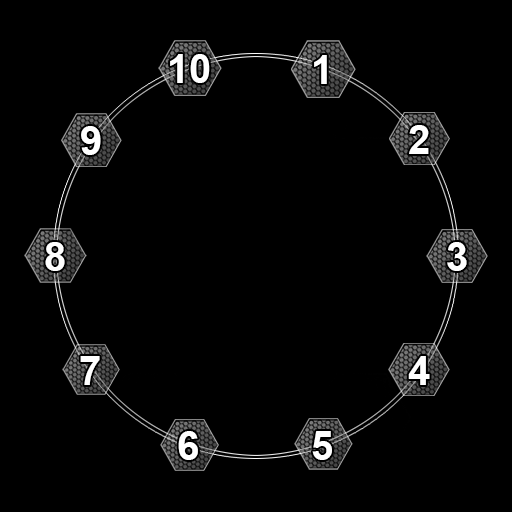
<style>
.page{position:relative;width:512px;height:512px;background:#000000}
.page>*{position:absolute;margin:0}
.t1{font:40px "Arial-BoldMT";color:#ffffff}
</style>
<div class="page">
<p class="t1" style="left:170px;top:54px;width:40px;height:29px">10</p>
<p class="t1" style="left:314px;top:55px;width:13px;height:29px">1</p>
<p class="t1" style="left:81px;top:126px;width:20px;height:29px">9</p>
<p class="t1" style="left:409px;top:125px;width:20px;height:29px">2</p>
<p class="t1" style="left:45px;top:242px;width:20px;height:29px">8</p>
<p class="t1" style="left:447px;top:242px;width:20px;height:29px">3</p>
<p class="t1" style="left:80px;top:356px;width:20px;height:29px">7</p>
<p class="t1" style="left:408px;top:356px;width:22px;height:29px">4</p>
<p class="t1" style="left:178px;top:431px;width:20px;height:29px">6</p>
<p class="t1" style="left:312px;top:431px;width:20px;height:29px">5</p>
</div>
